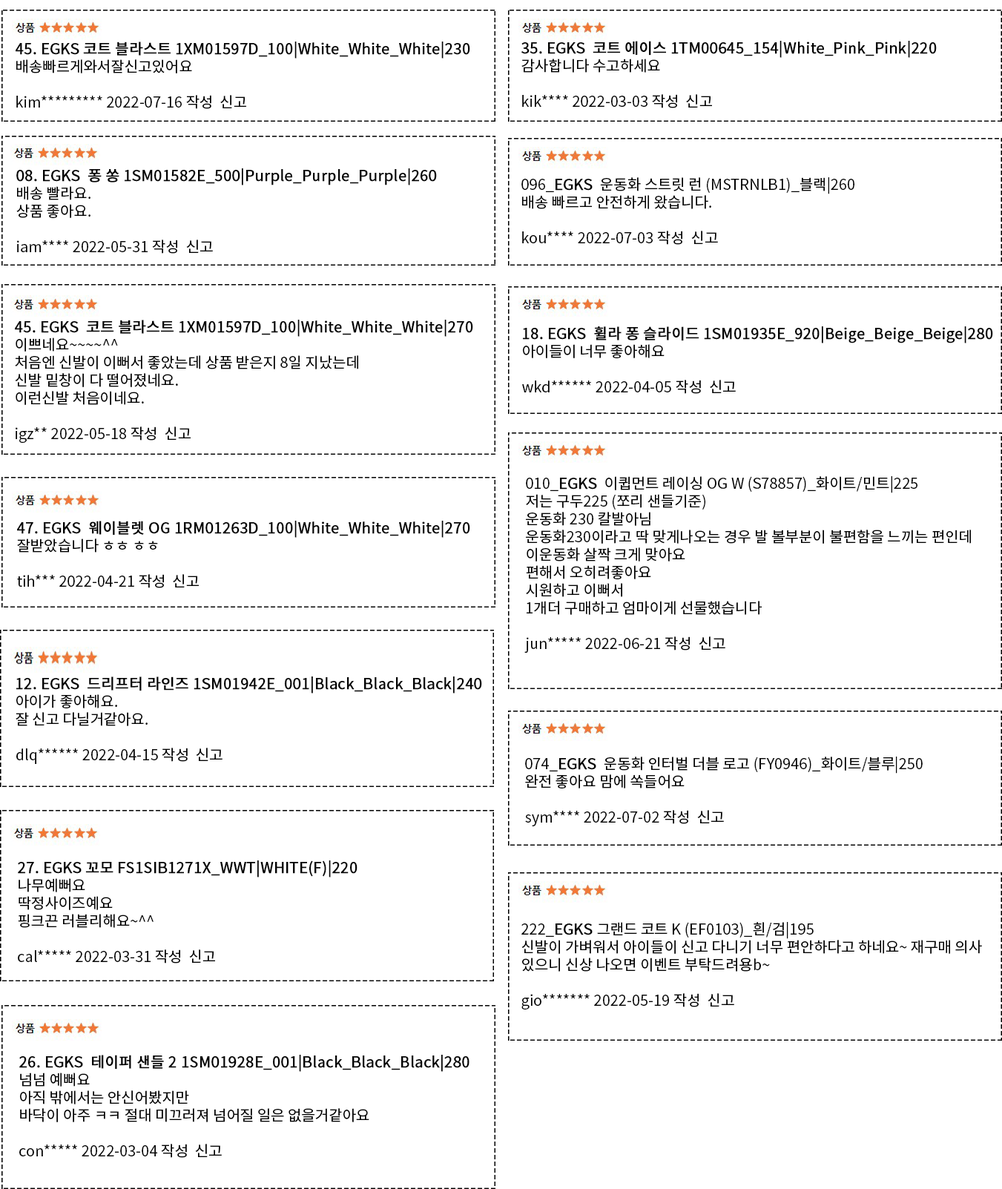
<style>
.page{position:relative;width:1002px;height:1189px;background:#ffffff}
.page>*{position:absolute;margin:0}
.t1{font:14.8px "NotoSansKR-Regular";color:#000000;font-weight:bold}
.t2{font:14.8px "NotoSansKR-Regular";color:#000000}
</style>
<div class="page">
<p class="t1" style="left:16px;top:42px;width:454px;height:67px">45. EGKS 코트 블라스트 1XM01597D_100|White_White_White|230 <br><span class="t2">배송빠르게와서잘신고있어요<br><br>kim********* 2022-07-16 작성  신고</span></p>
<p class="t1" style="left:522px;top:41px;width:415px;height:67px">35. EGKS  코트 에이스 1TM00645_154|White_Pink_Pink|220<br><span class="t2">감사합니다 수고하세요<br><br>kik**** 2022-03-03 작성  신고</span></p>
<p class="t1" style="left:16px;top:168px;width:421px;height:86px"><span class="t2"><br></span>08. EGKS  퐁 쏭 1SM01582E_500|Purple_Purple_Purple|260<span class="t2"> <br>배송 빨라요.<br>상품 좋아요.<br><br>iam**** 2022-05-31 작성  신고</span></p>
<p class="t2" style="left:522px;top:177px;width:333px;height:68px">096_<span class="t1">EGKS </span> 운동화 스트릿 런 (MSTRNLB1)_블랙|260<br>배송 빠르고 안전하게 왔습니다.<br><br>kou**** 2022-07-03 작성  신고</p>
<p class="t2" style="left:15px;top:320px;width:458px;height:123px"><span class="t1">45. EGKS  코트 블라스트 1XM01597D_100|White_White_White|270<br></span>이쁘네요~~~~^^<br>처음엔 신발이 이뻐서 좋았는데 상품 받은지 8일 지났는데<br>신발 밑창이 다 떨어졌네요.<br>이런신발 처음이네요.<br><br>igz** 2022-05-18 작성  신고</p>
<p class="t1" style="left:522px;top:326px;width:472px;height:68px">18. EGKS  휠라 퐁 슬라이드 1SM01935E_920|Beige_Beige_Beige|280<br><span class="t2">아이들이 너무 좋아해요<br><br>wkd****** 2022-04-05 작성  신고</span></p>
<p class="t2" style="left:525px;top:476px;width:446px;height:177px">010_<span class="t1">EGKS </span> 이큅먼트 레이싱 OG W (S78857)_화이트/민트|225<br>저는 구두225 (쪼리 샌들기준)<br>운동화 230 칼발아님<br>운동화230이라고 딱 맞게나오는 경우 발 볼부분이 불편함을 느끼는 편인데<br>이운동화 살짝 크게 맞아요<br>편해서 오히려좋아요<br>시원하고 이뻐서<br>1개더 구매하고 엄마이게 선물했습니다<br><br>jun***** 2022-06-21 작성  신고</p>
<p class="t1" style="left:17px;top:521px;width:453px;height:67px"><span class="t2"><br></span>47. EGKS  웨이블렛 OG 1RM01263D_100|White_White_White|270 <br><span class="t2">잘받았습니다 ㅎㅎ ㅎㅎ<br><br>tih*** 2022-04-21 작성  신고</span></p>
<p class="t1" style="left:16px;top:677px;width:466px;height:87px">12. EGKS  드리프터 라인즈 1SM01942E_001|Black_Black_Black|240<br><span class="t2">아이가 좋아해요.<br>잘 신고 다닐거같아요.<br><br>dlq****** 2022-04-15 작성  신고</span></p>
<p class="t2" style="left:525px;top:757px;width:398px;height:70px">074_<span class="t1">EGKS </span> 운동화 인터벌 더블 로고 (FY0946)_화이트/블루|250<br>완전 좋아요 맘에 쏙들어요<br><br>sym**** 2022-07-02 작성  신고</p>
<p class="t2" style="left:18px;top:861px;width:340px;height:103px"><span class="t1">27. EGKS 꼬모 FS1SIB1271X_WWT|WHITE(F)|220<br></span>나무예뻐요<br>딱정사이즈예요<br>핑크끈 러블리해요~^^<br><br>cal***** 2022-03-31 작성  신고</p>
<p class="t2" style="left:522px;top:922px;width:460px;height:88px">222_<span class="t1">EGKS </span>그랜드 코트 K (EF0103)_흰/검|195<br>신발이 가벼워서 아이들이 신고 다니기 너무 편안하다고 하네요~ 재구매 의사 <br>있으니 신상 나오면 이벤트 부탁드려용b~<br><br>gio******* 2022-05-19 작성  신고</p>
<p class="t2" style="left:19px;top:1055px;width:451px;height:103px"><span class="t1">26. EGKS  테이퍼 샌들 2 1SM01928E_001|Black_Black_Black|280<br></span>넘넘 예뻐요<br>아직 밖에서는 안신어봤지만<br>바닥이 아주 ㅋㅋ 절대 미끄러져 넘어질 일은 없을거같아요<br><br>con***** 2022-03-04 작성  신고</p>
</div>
